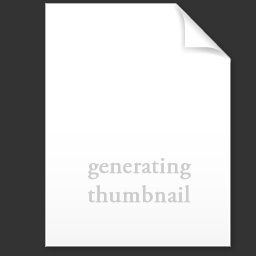
<style>
.page{position:relative;width:256px;height:256px;background:#ffffff}
.page>*{position:absolute;margin:0}
.t1{font:24px "AGaramondPro-Regular";color:#cccccc;font-weight:bold}
</style>
<div class="page">
<p class="t1" style="left:88px;top:158px;width:103px;height:45px;text-align:center">generating<br>thumbnail</p>
</div>
